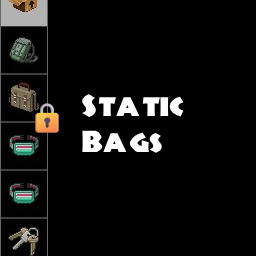
<style>
.page{position:relative;width:256px;height:256px;background:#000000}
.page>*{position:absolute;margin:0}
.t1{font:30px "JungleFever";color:#ffffff}
</style>
<div class="page">
<p class="t1" style="left:82px;top:94px;width:102px;height:59px">Static<br>Bags</p>
</div>
